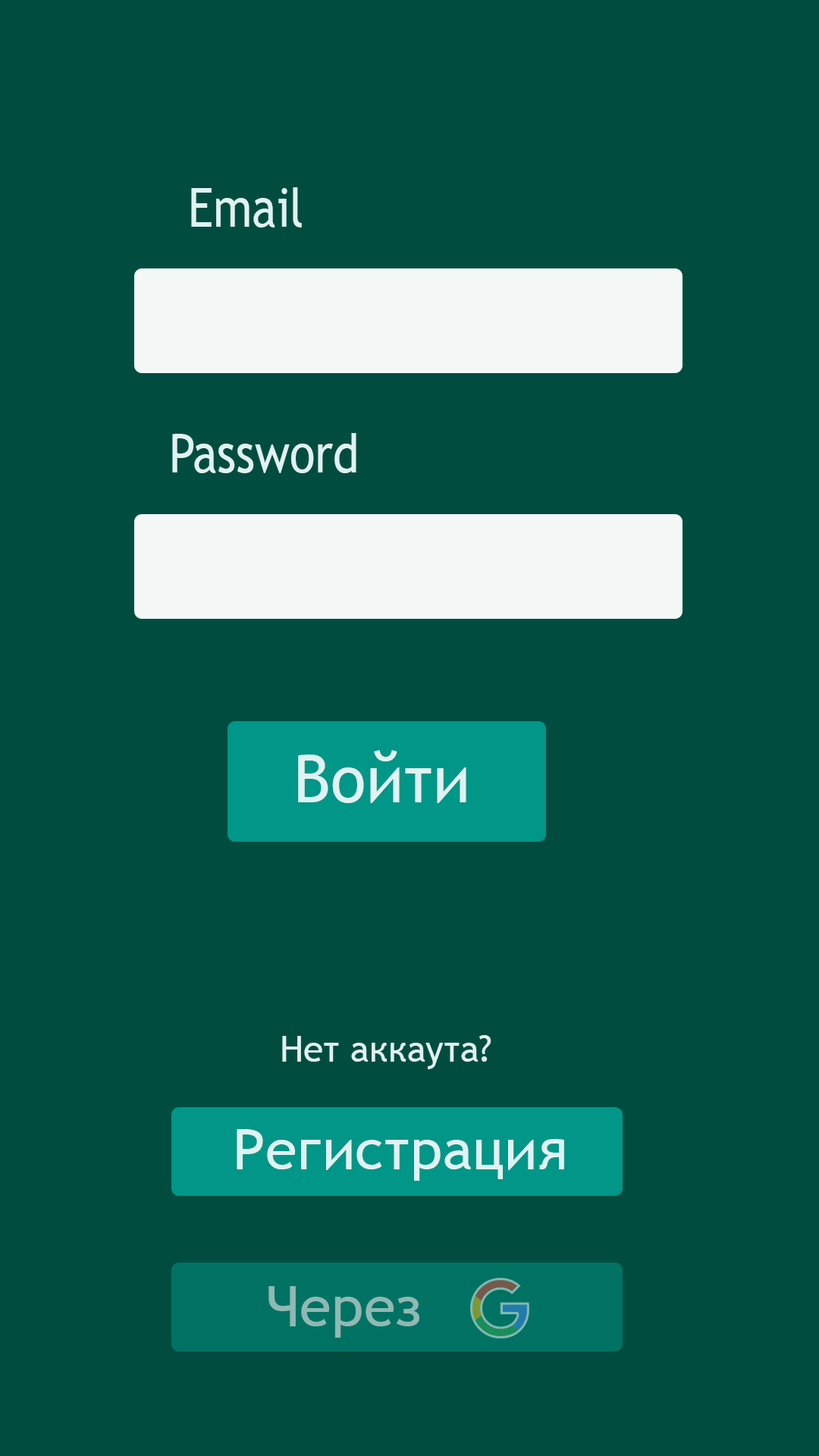
<style>
.page{position:relative;width:819px;height:1456px;background:#004d40}
.page>*{position:absolute;margin:0}
.t1{font:54.2px "TrebuchetMS";color:#e0f2f1;scale:0.86 1}
.t2{font:65.5px "TrebuchetMS";color:#e0f2f1}
.t3{font:36.4px "TrebuchetMS";color:#e0f2f1}
.t4{font:56.2px "TrebuchetMS";color:#e0f2f1;scale:1.03 1}
.t5{font:56.2px "TrebuchetMS";color:#8fb9b3;scale:1.03 1}
</style>
<div class="page">
<p class="t1" style="left:191px;top:187px;width:111px;height:40px">Email</p>
<p class="t1" style="left:172px;top:433px;width:184px;height:40px">Password</p>
<p class="t2" style="left:298px;top:750px;width:168px;height:53px">Войти</p>
<p class="t3" style="left:282px;top:1035px;width:209px;height:34px">Нет аккаута?</p>
<p class="t4" style="left:237px;top:1129px;width:327px;height:52px">Регистрация</p>
<p class="t5" style="left:268px;top:1286px;width:151px;height:52px">Через</p>
</div>
